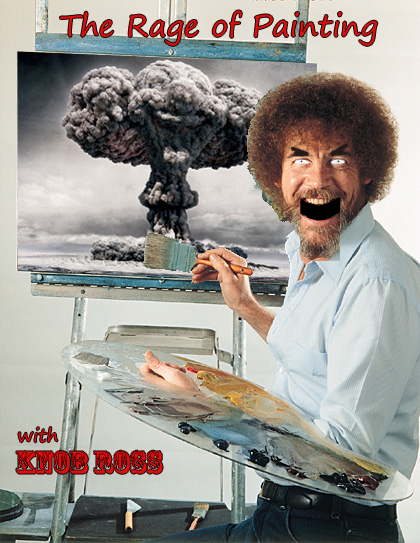
<style>
.page{position:relative;width:420px;height:543px}
.page>*{position:absolute;margin:0}
.t1{font:30px "SegoePrint";color:#da0f0f}
.t2{font:18px "SegoePrint";color:#da0f0f}
.t3{font:30px "RosewoodStd-Regular";color:#da0f0f}
</style>
<div class="page">
<p class="t1" style="left:60px;top:10px;width:318px;height:36px">The Rage of Painting</p>
<p class="t2" style="left:18px;top:427px;width:40px;height:16px">with</p>
<p class="t3" style="left:16px;top:450px;width:147px;height:24px">KNOB ROSS</p>
</div>
